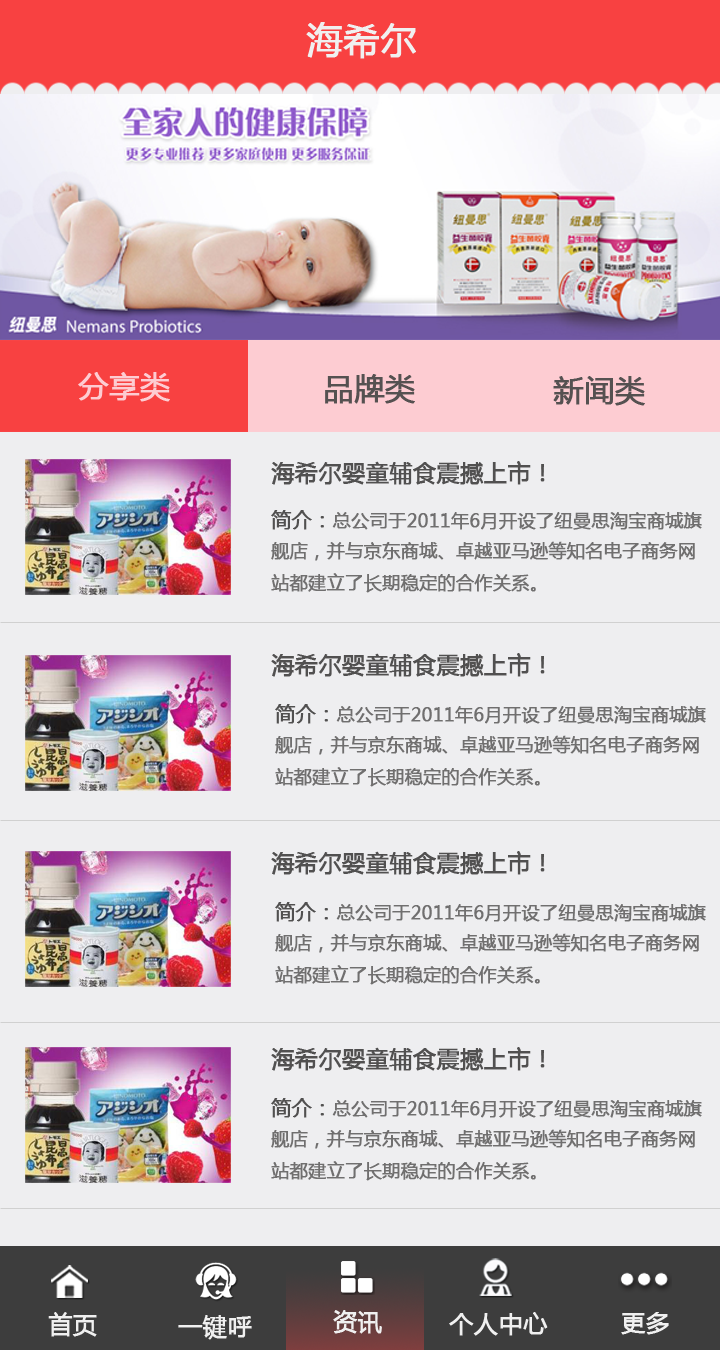
<style>
.page{position:relative;width:720px;height:1350px;background:#eeeef0}
.page>*{position:absolute;margin:0}
.t1{font:36px "MicrosoftYaHei";color:#f0f0f0;font-weight:bold}
.t2{font:30px "MicrosoftYaHei";color:#fdccd2;font-weight:bold}
.t3{font:30px "MicrosoftYaHei";color:#555151;font-weight:bold}
.t4{font:23px "MicrosoftYaHei";color:#515050;font-weight:bold}
.t5{font:18px/32px "MicrosoftYaHei";color:#706f6f;font-weight:bold}
.t6{font:20px/32px "MicrosoftYaHei";color:#515050;font-weight:bold}
.t7{font:24px "MicrosoftYaHei";color:#f0f0f0;font-weight:bold}
</style>
<div class="page">
<p class="t1" style="left:306px;top:22px;width:110px;height:37px">海希尔</p>
<p class="t2" style="left:78px;top:372px;width:92px;height:30px">分享类</p>
<p class="t3" style="left:325px;top:374px;width:90px;height:30px">品牌类</p>
<p class="t3" style="left:553px;top:376px;width:92px;height:30px">新闻类</p>
<p class="t4" style="left:271px;top:461px;width:274px;height:24px">海希尔婴童辅食震撼上市！</p>
<p class="t5" style="left:271px;top:510px;width:431px;height:83px"><span class="t6">简介：</span>总公司于2011年6月开设了纽曼思淘宝商城旗<br>舰店，并与京东商城、卓越亚马逊等知名电子商务网<br>站都建立了长期稳定的合作关系。</p>
<p class="t4" style="left:271px;top:653px;width:274px;height:24px">海希尔婴童辅食震撼上市！</p>
<p class="t5" style="left:275px;top:704px;width:431px;height:83px"><span class="t6">简介：</span>总公司于2011年6月开设了纽曼思淘宝商城旗<br>舰店，并与京东商城、卓越亚马逊等知名电子商务网<br>站都建立了长期稳定的合作关系。</p>
<p class="t4" style="left:271px;top:851px;width:274px;height:24px">海希尔婴童辅食震撼上市！</p>
<p class="t5" style="left:275px;top:902px;width:431px;height:83px"><span class="t6">简介：</span>总公司于2011年6月开设了纽曼思淘宝商城旗<br>舰店，并与京东商城、卓越亚马逊等知名电子商务网<br>站都建立了长期稳定的合作关系。</p>
<p class="t4" style="left:271px;top:1047px;width:274px;height:24px">海希尔婴童辅食震撼上市！</p>
<p class="t5" style="left:271px;top:1098px;width:431px;height:83px"><span class="t6">简介：</span>总公司于2011年6月开设了纽曼思淘宝商城旗<br>舰店，并与京东商城、卓越亚马逊等知名电子商务网<br>站都建立了长期稳定的合作关系。</p>
<p class="t7" style="left:48px;top:1312px;width:49px;height:25px">首页</p>
<p class="t7" style="left:333px;top:1310px;width:49px;height:24px">资讯</p>
<p class="t7" style="left:449px;top:1312px;width:99px;height:24px">个人中心</p>
<p class="t7" style="left:621px;top:1312px;width:48px;height:23px">更多</p>
<p class="t7" style="left:178px;top:1315px;width:74px;height:25px">一键呼</p>
</div>
